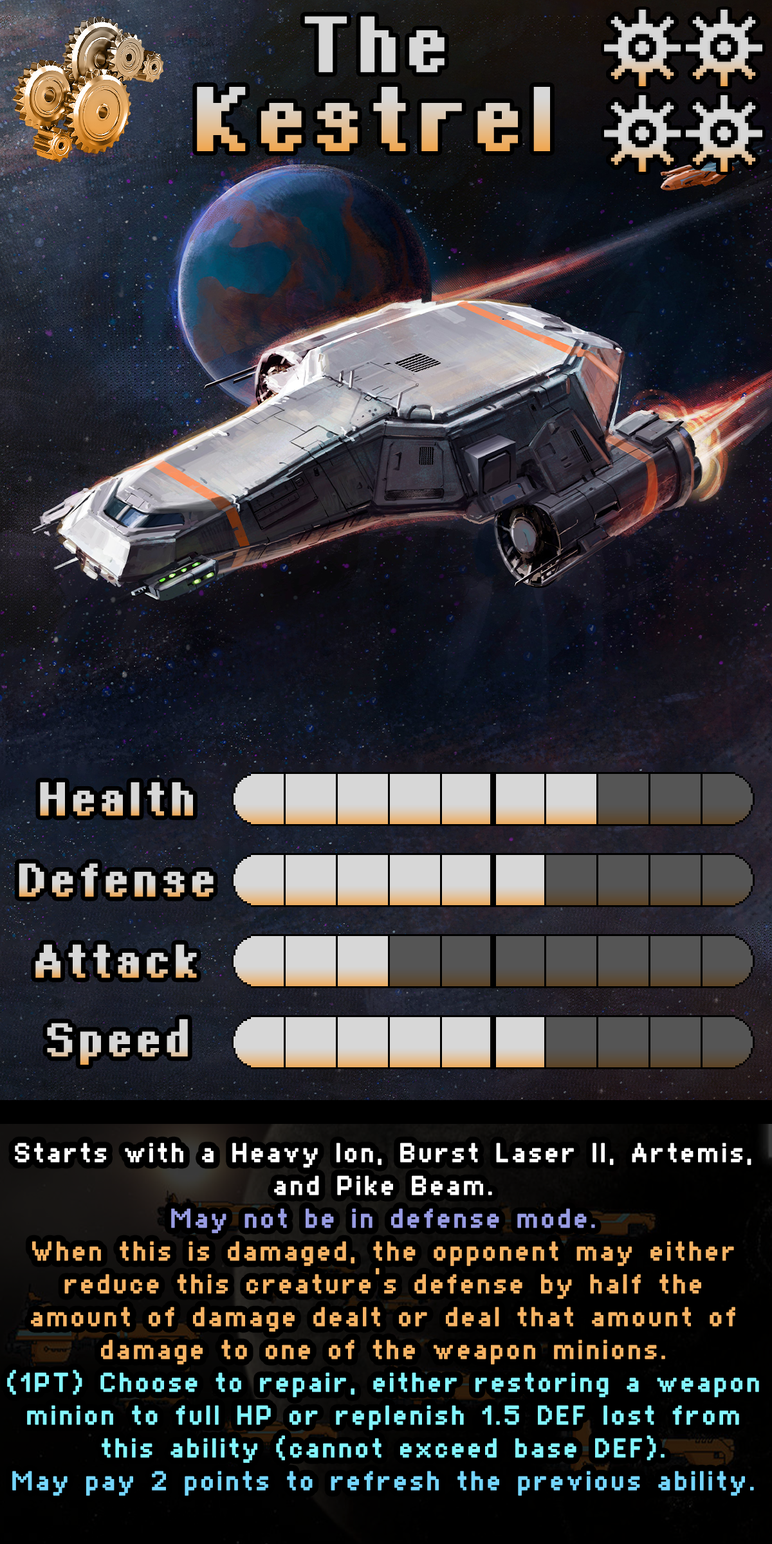
<style>
.page{position:relative;width:772px;height:1544px}
.page>*{position:absolute;margin:0}
.t1{font:137.5px/73px "Supertext02Bold"}
.t2{font:119.6px/73px "Supertext02Bold"}
.t3{font:70.8px "Supertext02Bold"}
.t4{font:70.8px "Supertext02Bold";color:#d7d7d7}
.t5{font:45px/32.8px "Supertext01";color:#f6b364;font-weight:bold}
.t6{font:45px/32.8px "Supertext01";color:#ffffff;font-weight:bold}
.t7{font:45px/32.8px "Supertext01";color:#989ce3;font-weight:bold}
.t8{font:45px/32.8px "Supertext01";color:#83f5ff;font-weight:bold}
.t9{font:45px/32.8px "Supertext01";color:#75d6ff;font-weight:bold}
</style>
<div class="page">
<p class="t1" style="left:197px;top:16px;width:353px;height:135px;text-align:center"><span class="t2">The<br></span>Kestrel</p>
<p class="t3" style="left:40px;top:782px;width:153px;height:34px">Health</p>
<p class="t3" style="left:19px;top:864px;width:195px;height:33px">Defense</p>
<p class="t3" style="left:35px;top:945px;width:162px;height:33px">Attack</p>
<p class="t4" style="left:47px;top:1019px;width:141px;height:46px">Speed</p>
<p class="t5" style="left:7px;top:1143px;width:752px;height:353px;text-align:center"><span class="t6">Starts with a Heavy Ion, Burst Laser II, Artemis, and Pike Beam.<br></span><span class="t7">May not be in defense mode.<br></span>When this is damaged, the opponent may either reduce this creature's defense by half the amount of damage dealt or deal that amount of damage to one of the weapon minions.<br><span class="t8">(1PT) Choose to repair, either restoring a weapon minion to full HP or replenish 1.5 DEF lost from this ability (cannot exceed base DEF).<br></span><span class="t9">May pay 2 points to refresh the previous ability.</span></p>
</div>
